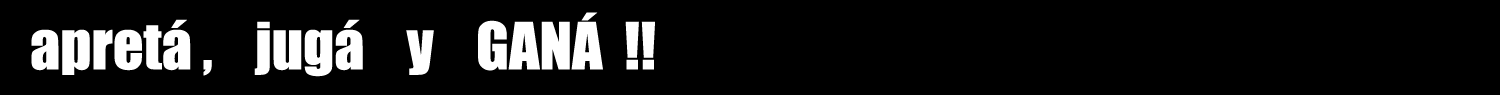
<style>
.page{position:relative;width:1500px;height:95px;background:#000000}
.page>*{position:absolute;margin:0}
.t1{font:59.1px "Impact";color:#ffffff}
</style>
<div class="page">
<p class="t1" style="left:31px;top:12px;width:624px;height:65px">apretá ,    jugá    y    GANÁ  !!</p>
</div>
